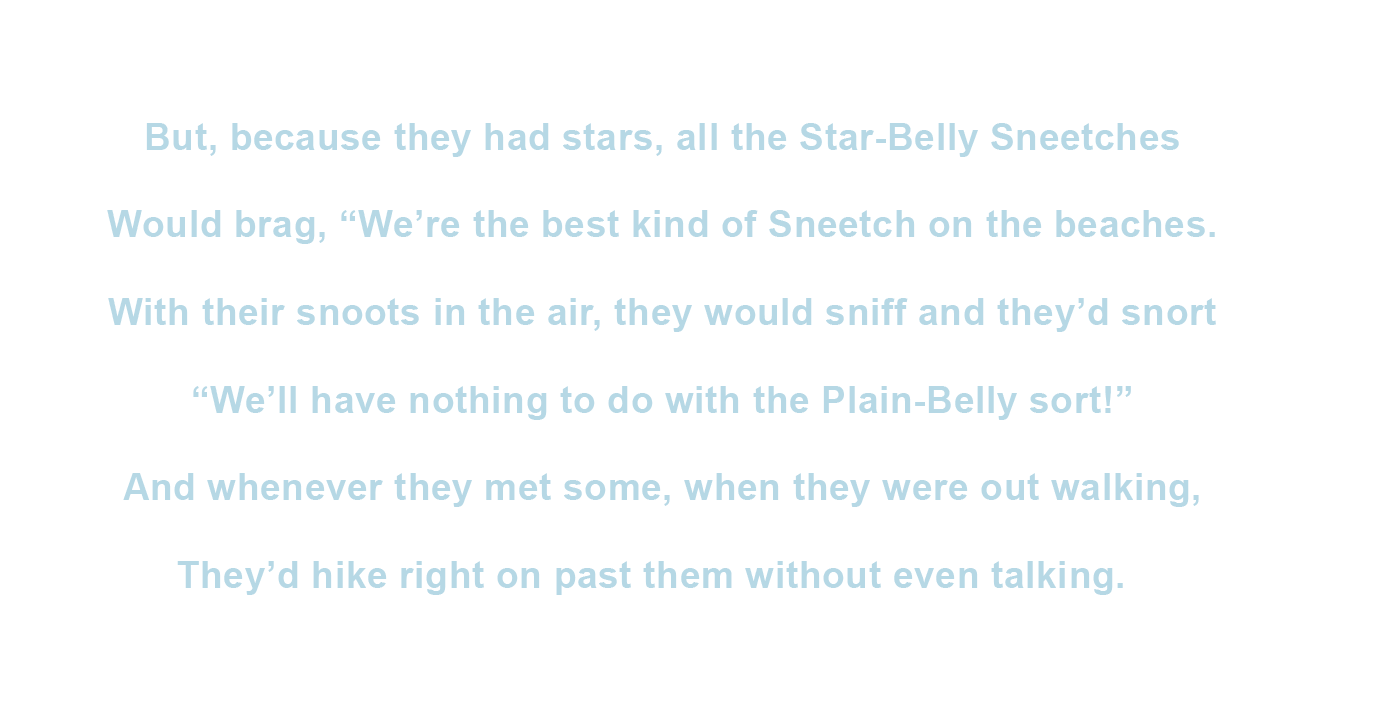
<style>
.page{position:relative;width:1388px;height:720px;background:#ffffff}
.page>*{position:absolute;margin:0}
.t1{font:36.5px "Arial-BoldMT";letter-spacing:0.025em;color:#b6d8e5}
</style>
<div class="page">
<p class="t1" style="left:107px;top:123px;width:1109px;height:472px;text-align:center">But, because they had stars, all the Star-Belly Sneetches<br><br>Would brag, “We’re the best kind of Sneetch on the beaches.<br><br>With their snoots in the air, they would sniff and they’d snort<br><br>“We’ll have nothing to do with the Plain-Belly sort!”<br><br>And whenever they met some, when they were out walking,<br><br>They’d hike right on past them without even talking.</p>
</div>
